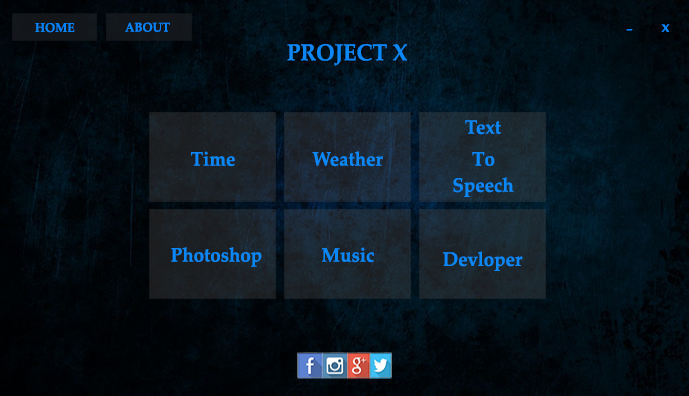
<style>
.page{position:relative;width:689px;height:396px}
.page>*{position:absolute;margin:0}
.t1{font:12.6px "PalatinoLinotype-Bold";color:#0783f9;scale:0.96 1}
.t2{font:19.5px "Perpetua-BoldItalic";color:#067ffa;scale:0.96 1}
.t3{font:20.3px "Nyala-Regular";color:#0985fb;scale:0.96 1}
.t4{font:23px "PalatinoLinotype-Bold";color:#0b87f7;scale:0.96 1}
.t5{font:19.5px "PalatinoLinotype-Bold";color:#0b87f7;scale:0.96 1}
</style>
<div class="page">
<p class="t1" style="left:35px;top:23px;width:40px;height:10px">HOME</p>
<p class="t1" style="left:125px;top:22px;width:45px;height:10px">ABOUT</p>
<p class="t2" style="left:626px;top:29px;width:7px;height:2px">-</p>
<p class="t3" style="left:661px;top:24px;width:9px;height:8px">x</p>
<p class="t4" style="left:287px;top:44px;width:120px;height:22px">PROJECT X</p>
<p class="t5" style="left:465px;top:120px;width:36px;height:15px">Text</p>
<p class="t5" style="left:191px;top:151px;width:44px;height:16px">Time</p>
<p class="t5" style="left:312px;top:151px;width:71px;height:16px">Weather</p>
<p class="t5" style="left:472px;top:152px;width:23px;height:14px">To</p>
<p class="t5" style="left:453px;top:177px;width:61px;height:20px">Speech</p>
<p class="t5" style="left:171px;top:247px;width:91px;height:20px">Photoshop</p>
<p class="t5" style="left:322px;top:247px;width:52px;height:16px">Music</p>
<p class="t5" style="left:443px;top:251px;width:80px;height:20px">Devloper</p>
</div>
